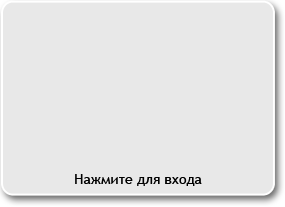
<style>
.page{position:relative;width:285px;height:207px;background:#e8e8e8}
.page>*{position:absolute;margin:0}
.t1{font:14px "TrebuchetMS";color:#010101}
</style>
<div class="page">
<p class="t1" style="left:75px;top:174px;width:127px;height:12px">Нажмите для входа</p>
</div>
